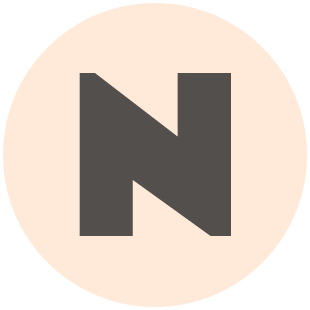
<style>
.page{position:relative;width:310px;height:310px;background:#ffead9}
.page>*{position:absolute;margin:0}
.t1{font:208.6px "RammettoOne-Regular";color:#534f4c;scale:0.93 1}
</style>
<div class="page">
<p class="t1" style="left:79px;top:73px;width:152px;height:163px">N</p>
</div>
